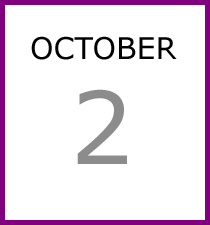
<style>
.page{position:relative;width:210px;height:225px;background:#ffffff}
.page>*{position:absolute;margin:0}
.t1{font:30px "Verdana";color:#000000}
.t2{font:100px "Verdana";color:#8c8c8c}
</style>
<div class="page">
<p class="t1" style="left:31px;top:36px;width:146px;height:24px">OCTOBER</p>
<p class="t2" style="left:77px;top:89px;width:50px;height:75px">2</p>
</div>
